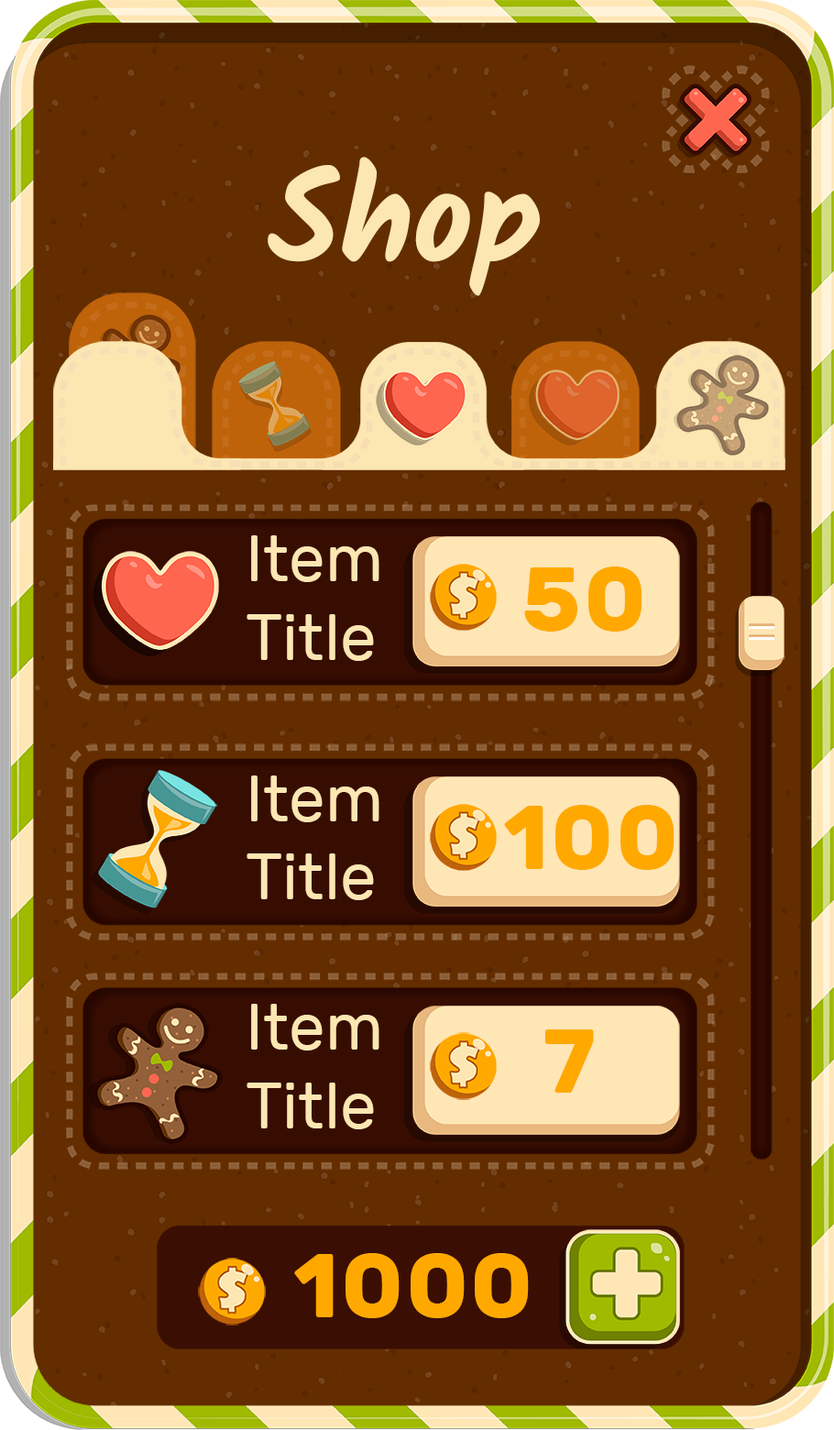
<style>
.page{position:relative;width:834px;height:1430px;background:#632d00}
.page>*{position:absolute;margin:0}
.t1{font:130.9px "Kalam-Bold";color:#fce6b2}
.t2{font:65.4px "Rubik-Regular";color:#fce6b2}
.t3{font:90.8px "Rubik-Bold";letter-spacing:0.025em;color:#ffa900}
</style>
<div class="page">
<p class="t1" style="left:268px;top:157px;width:272px;height:139px">Shop</p>
<p class="t2" style="left:247px;top:535px;width:132px;height:126px">Item <br>Title</p>
<p class="t3" style="left:524px;top:566px;width:118px;height:65px">50</p>
<p class="t2" style="left:247px;top:775px;width:132px;height:125px">Item <br>Title</p>
<p class="t3" style="left:504px;top:805px;width:171px;height:65px">100</p>
<p class="t2" style="left:247px;top:1004px;width:132px;height:125px">Item <br>Title</p>
<p class="t3" style="left:544px;top:1029px;width:50px;height:63px">7</p>
<p class="t3" style="left:294px;top:1253px;width:235px;height:65px">1000</p>
</div>
